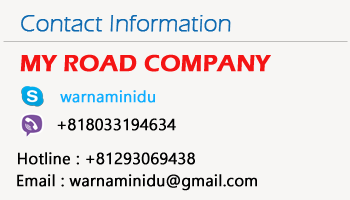
<style>
.page{position:relative;width:350px;height:200px;background:#f7f6f4}
.page>*{position:absolute;margin:0}
.t1{font:24px "ErasITC-Light";color:#0e6ab1;font-weight:bold}
.t2{font:24px "ErasITC-Demi";color:#f41414;font-weight:bold}
.t3{font:16px "Gadugi";color:#0eadff;font-weight:bold}
.t4{font:16px "Gadugi";color:#000000;font-weight:bold}
</style>
<div class="page">
<p class="t1" style="left:21px;top:15px;width:210px;height:17px">Contact Information</p>
<p class="t2" style="left:20px;top:54px;width:251px;height:18px">MY ROAD COMPANY</p>
<p class="t3" style="left:60px;top:90px;width:95px;height:13px">warnaminidu</p>
<p class="t4" style="left:57px;top:118px;width:119px;height:13px">+818033194634</p>
<p class="t4" style="left:18px;top:152px;width:177px;height:13px">Hotline : +81293069438</p>
<p class="t4" style="left:17px;top:174px;width:240px;height:17px">Email : warnaminidu@gmail.com</p>
</div>
